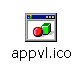
<style>
.page{position:relative;width:80px;height:80px;background:#ffffff}
.page>*{position:absolute;margin:0}
.t1{font:14px "MSReferenceSansSerif";color:#000000}
</style>
<div class="page">
<p class="t1" style="left:12px;top:47px;width:59px;height:14px">appvl.ico</p>
</div>
